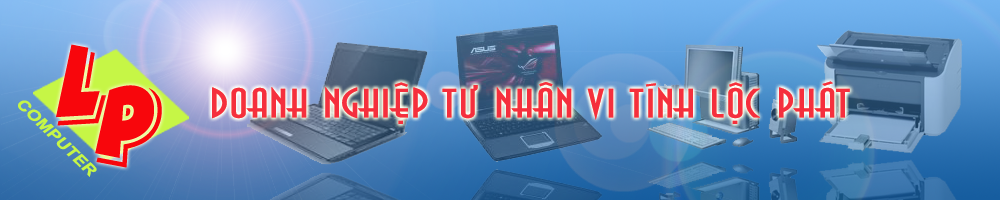
<style>
.page{position:relative;width:1000px;height:200px}
.page>*{position:absolute;margin:0}
.t1{font:122.6px "VfFree24";color:#f8060c;scale:0.82 1}
.t2{font:38.2px "VfFree06";color:#f52f3d;scale:1.36 1}
.t3{font:15.6px "Arial-BoldMT";color:#c6f646;scale:1.16 1}
</style>
<div class="page">
<p class="t1" style="left:56px;top:44px;width:51px;height:82px">l</p>
<p class="t1" style="left:95px;top:85px;width:67px;height:83px">p</p>
<p class="t2" style="left:212px;top:81px;width:638px;height:43px">DOANH NGHIEÄP TÖ NHAÂN VI TÍNH LOÄC PHAÙT</p>
<p class="t2" style="left:212px;top:81px;width:638px;height:43px">DOANH NGHIEÄP TÖ NHAÂN VI TÍNH LOÄC PHAÙT</p>
<p class="t2" style="left:212px;top:81px;width:638px;height:43px">DOANH NGHIEÄP TÖ NHAÂN VI TÍNH LOÄC PHAÙT</p>
<p class="t3" style="left:18px;top:100px;width:79px;height:77px;rotate:44deg">COMPUTER</p>
</div>
